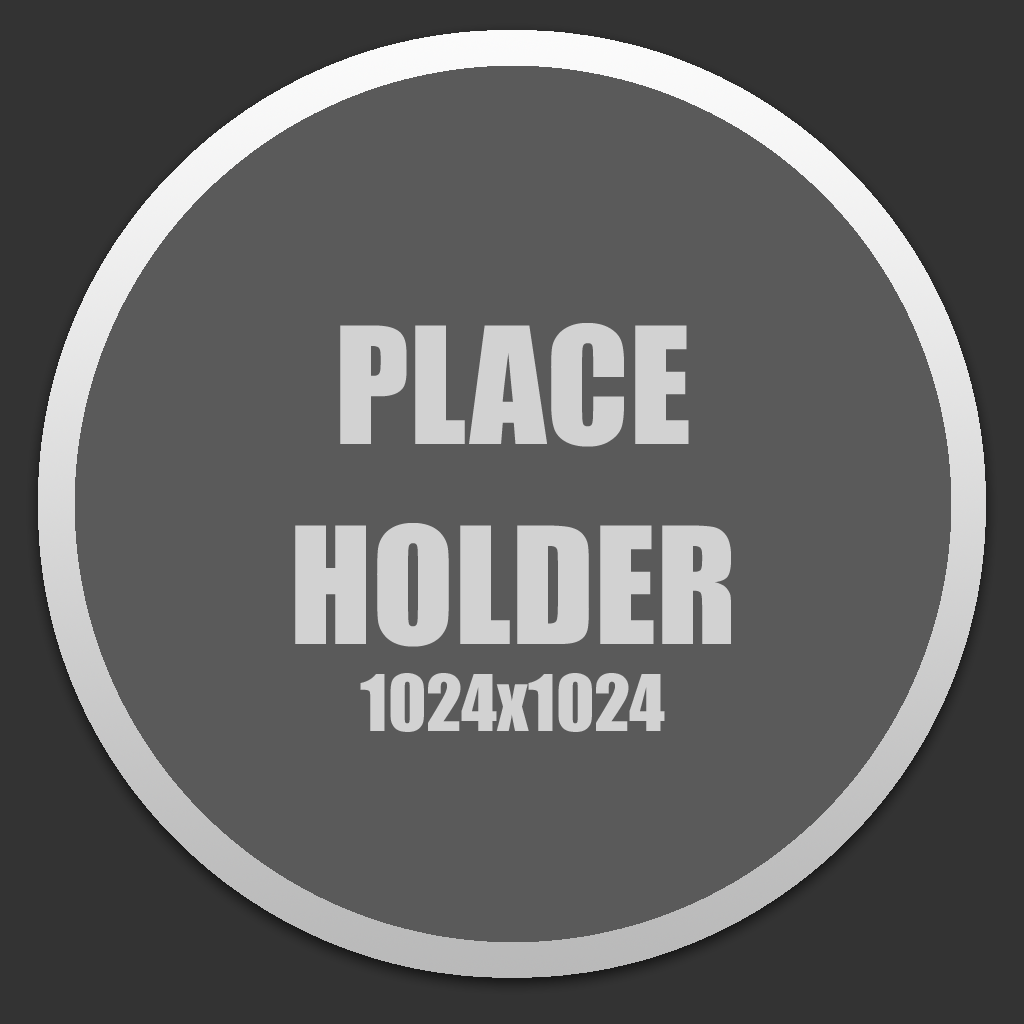
<style>
.page{position:relative;width:1024px;height:1024px;background:#5a5a5a}
.page>*{position:absolute;margin:0}
.t1{font:150px/200px "Impact";color:#d2d2d2}
.t2{font:72px "Impact";color:#d2d2d2}
</style>
<div class="page">
<p class="t1" style="left:295px;top:323px;width:436px;height:324px;text-align:center">PLACE<br>HOLDER</p>
<p class="t2" style="left:360px;top:673px;width:305px;height:59px">1024x1024</p>
</div>
